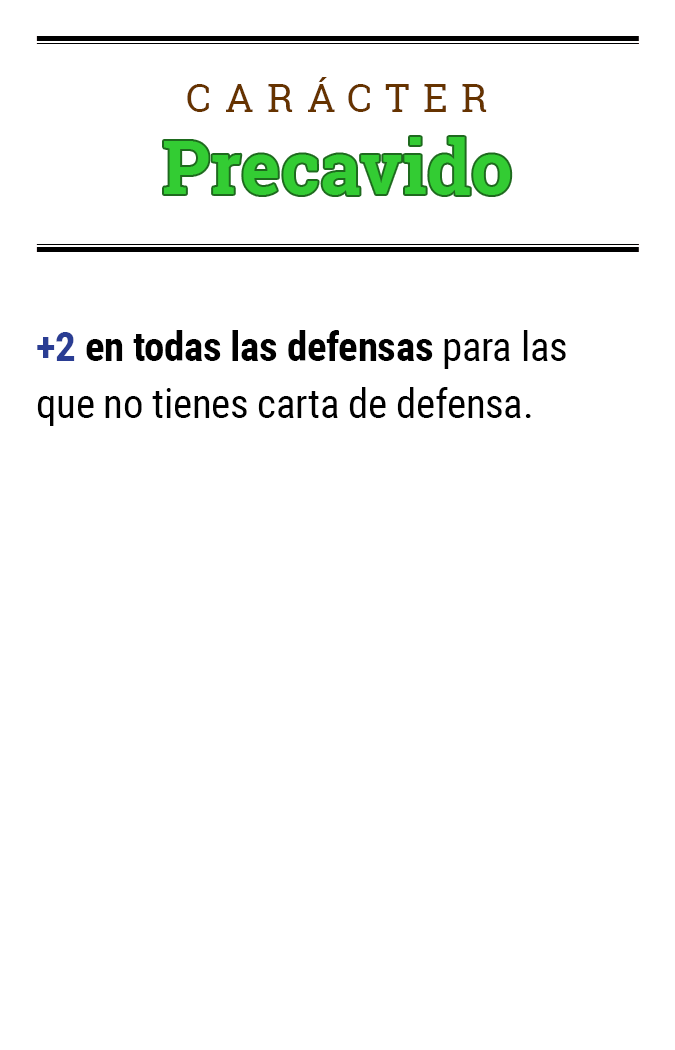
<style>
.page{position:relative;width:675px;height:1050px;background:#ffffff}
.page>*{position:absolute;margin:0}
.t1{font:39.2px "RobotoSlab-Regular";letter-spacing:0.34em;color:#663300}
.t2{font:74.5px "RobotoSlab-Bold";color:#33cc33}
.t3{font:41.1px/57.1px "RobotoCondensed-Regular";letter-spacing:-0.01em;color:#000000}
.t4{font:41.1px/57.1px "RobotoCondensed-Bold";letter-spacing:-0.01em;color:#2a3d93}
.t5{font:41.1px/57.1px "RobotoCondensed-Bold";letter-spacing:-0.01em;color:#000000}
</style>
<div class="page">
<p class="t1" style="left:187px;top:77px;width:300px;height:35px">CARÁCTER</p>
<p class="t2" style="left:164px;top:137px;width:347px;height:58px">Precavido</p>
<p class="t3" style="left:37px;top:330px;width:529px;height:96px"><span class="t4">+2</span><span class="t5"> en todas las defensas </span>para las<br>que no tienes carta de defensa.</p>
</div>
